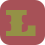
<style>
.page{position:relative;width:45px;height:45px;background:#a75157}
.page>*{position:absolute;margin:0}
.t1{font:50px "Saddlebag-Black";color:#949146}
</style>
<div class="page">
<p class="t1" style="left:6px;top:10px;width:30px;height:26px">L</p>
</div>
